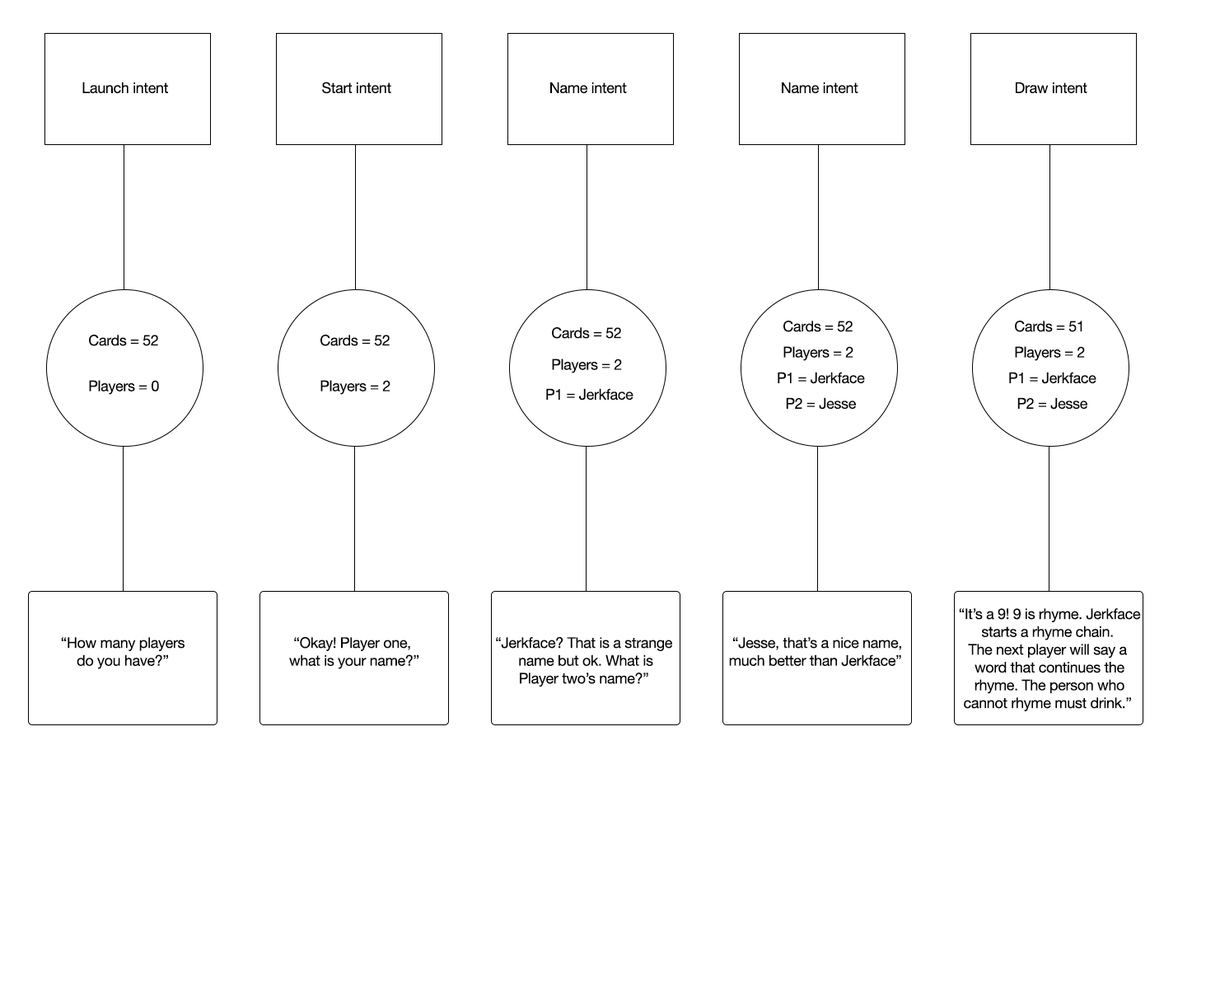
<style>
.page{position:relative;width:1206px;height:989px;background:#ffffff}
.page>*{position:absolute;margin:0}
.t1{font:14.8px "HelveticaNeue";letter-spacing:-0.02em;color:#000000}
.t2{font:9.9px "CourierNewPS-BoldItalicMT";letter-spacing:-0.02em;color:#ff3399}
.t3{font:14.8px "HelveticaNeue";letter-spacing:-0.02em;color:#020202}
</style>
<div class="page">
<p class="t1" style="left:82px;top:82px;width:86px;height:12px"><span class="t2">     </span>Launch intent</p>
<p class="t1" style="left:322px;top:82px;width:69px;height:12px"><span class="t2">     </span>Start intent</p>
<p class="t1" style="left:550px;top:82px;width:77px;height:12px"><span class="t2">     </span>Name intent</p>
<p class="t1" style="left:782px;top:82px;width:76px;height:12px"><span class="t2">     </span>Name intent</p>
<p class="t1" style="left:1016px;top:82px;width:72px;height:12px"><span class="t2">     </span>Draw intent</p>
<p class="t3" style="left:552px;top:327px;width:69px;height:12px">Cards = 52</p>
<p class="t3" style="left:783px;top:320px;width:70px;height:12px">Cards = 52</p>
<p class="t3" style="left:1015px;top:320px;width:68px;height:12px">Cards = 51</p>
<p class="t3" style="left:89px;top:334px;width:69px;height:12px">Cards = 52</p>
<p class="t3" style="left:320px;top:334px;width:70px;height:12px">Cards = 52</p>
<p class="t3" style="left:783px;top:346px;width:71px;height:15px">Players = 2</p>
<p class="t3" style="left:1015px;top:346px;width:70px;height:15px">Players = 2</p>
<p class="t3" style="left:552px;top:358px;width:70px;height:15px">Players = 2</p>
<p class="t3" style="left:778px;top:372px;width:87px;height:12px">P1 = Jerkface</p>
<p class="t3" style="left:1009px;top:372px;width:88px;height:12px">P1 = Jerkface</p>
<p class="t3" style="left:89px;top:380px;width:70px;height:15px">Players = 0</p>
<p class="t3" style="left:320px;top:380px;width:71px;height:15px">Players = 2</p>
<p class="t3" style="left:546px;top:388px;width:88px;height:12px">P1 = Jerkface</p>
<p class="t3" style="left:786px;top:397px;width:70px;height:12px">P2 = Jesse</p>
<p class="t3" style="left:1017px;top:397px;width:71px;height:12px">P2 = Jesse</p>
<p class="t3" style="left:959px;top:608px;width:182px;height:103px;text-align:center">“It’s a 9! 9 is rhyme. Jerkface<br>starts a rhyme chain. <br>The next player will say a <br>word that continues the<br>rhyme. The person who<br>cannot rhyme must drink.”</p>
<p class="t3" style="left:61px;top:637px;width:124px;height:32px;text-align:center">“How many players<br>do you have?”</p>
<p class="t3" style="left:289px;top:636px;width:130px;height:33px;text-align:center">“Okay! Player one, <br>what is your name?”</p>
<p class="t3" style="left:496px;top:636px;width:176px;height:51px;text-align:center">“Jerkface? That is a strange <br>name but ok. What is<br>Player two’s name?”</p>
<p class="t3" style="left:729px;top:637px;width:172px;height:30px;text-align:center">“Jesse, that’s a nice name,<br>much better than Jerkface”</p>
</div>
